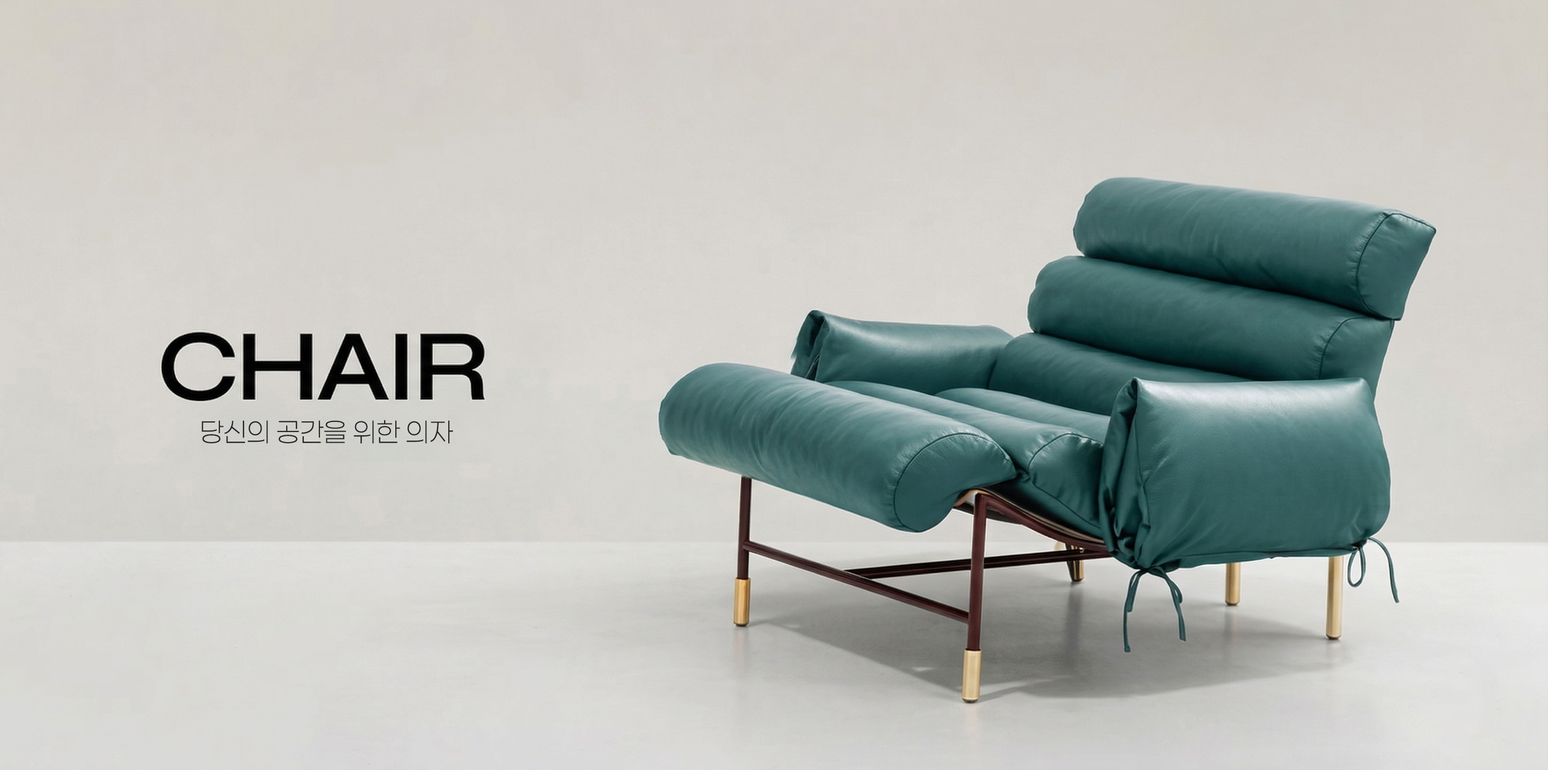
<style>
.page{position:relative;width:1548px;height:770px}
.page>*{position:absolute;margin:0}
.t1{font:26.7px "Paperlogy-2ExtraLight";color:#242424}
</style>
<div class="page">
<p class="t1" style="left:202px;top:420px;width:251px;height:24px">당신의 공간을 위한 의자</p>
</div>
